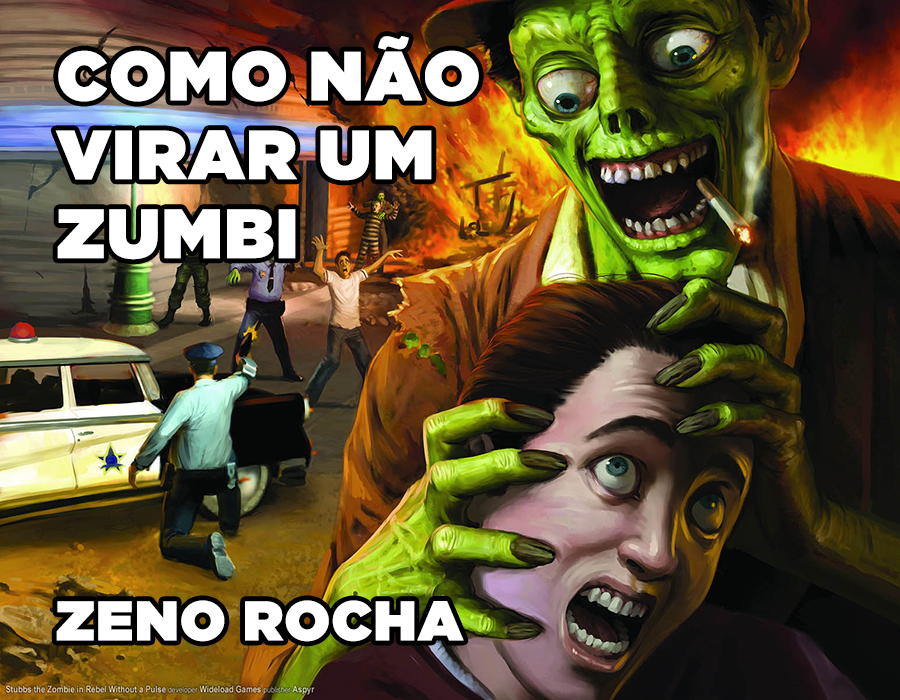
<style>
.page{position:relative;width:900px;height:700px}
.page>*{position:absolute;margin:0}
.t1{font:69.4px/78.8px "GothamUltra";color:#ffffff;font-weight:bold}
.t2{font:55.7px "GothamUltra";color:#ffffff;font-weight:bold}
</style>
<div class="page">
<p class="t1" style="left:55px;top:36px;width:424px;height:224px">COMO NÃO<br>VIRAR UM<br>ZUMBI</p>
<p class="t2" style="left:56px;top:600px;width:408px;height:42px">ZENO ROCHA</p>
</div>
